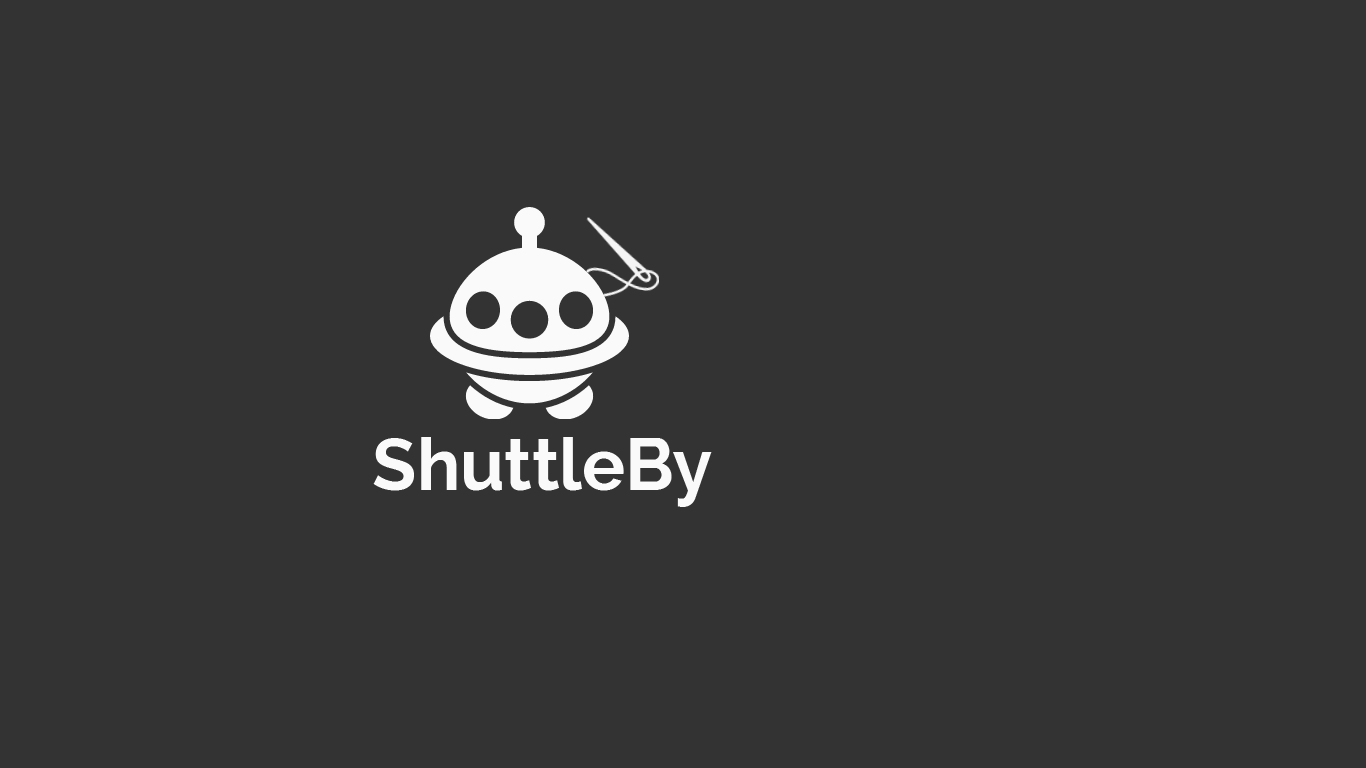
<style>
.page{position:relative;width:1366px;height:768px;background:#333333}
.page>*{position:absolute;margin:0}
.t1{font:72px "Raleway-Bold";color:#fafafa}
</style>
<div class="page">
<p class="t1" style="left:373px;top:437px;width:339px;height:70px">ShuttleBy</p>
</div>
